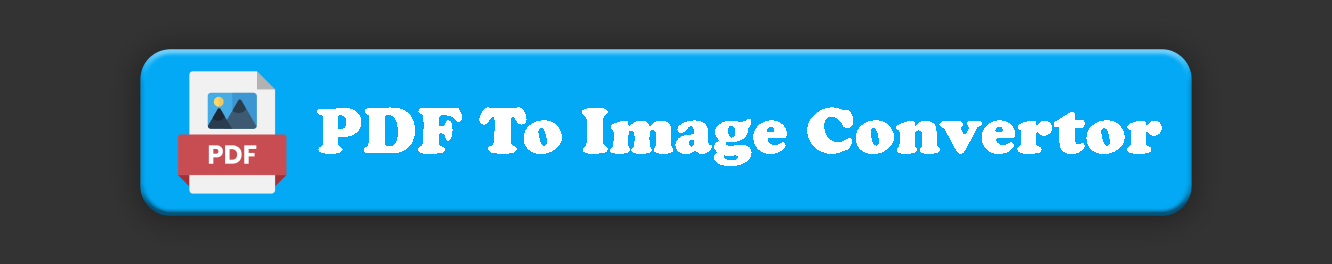
<style>
.page{position:relative;width:1332px;height:264px;background:#03a9f4}
.page>*{position:absolute;margin:0}
.t1{font:67px "CooperBlack";letter-spacing:0.01em;color:#ffffff}
</style>
<div class="page">
<p class="t1" style="left:317px;top:107px;width:845px;height:59px">PDF To Image Convertor</p>
</div>
